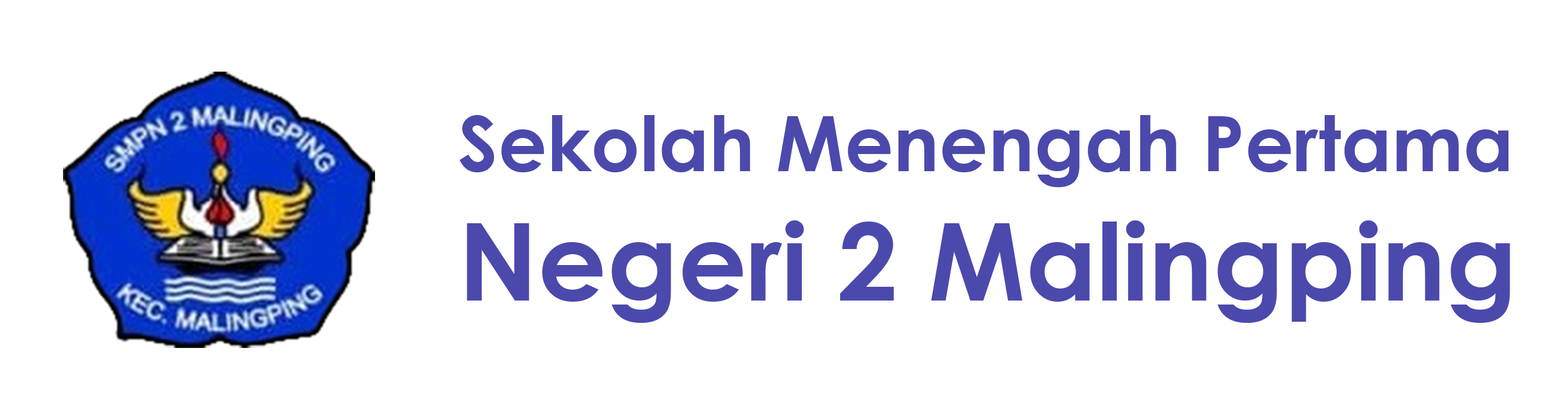
<style>
.page{position:relative;width:1568px;height:411px;background:#ffffff}
.page>*{position:absolute;margin:0}
.t1{font:76.4px "CenturyGothic-Bold";color:#4b49ac}
.t2{font:107.9px "CenturyGothic-Bold";color:#4b49ac}
</style>
<div class="page">
<p class="t1" style="left:459px;top:115px;width:1051px;height:208px">Sekolah Menengah Pertama<br><span class="t2">Negeri 2 Malingping</span></p>
</div>
